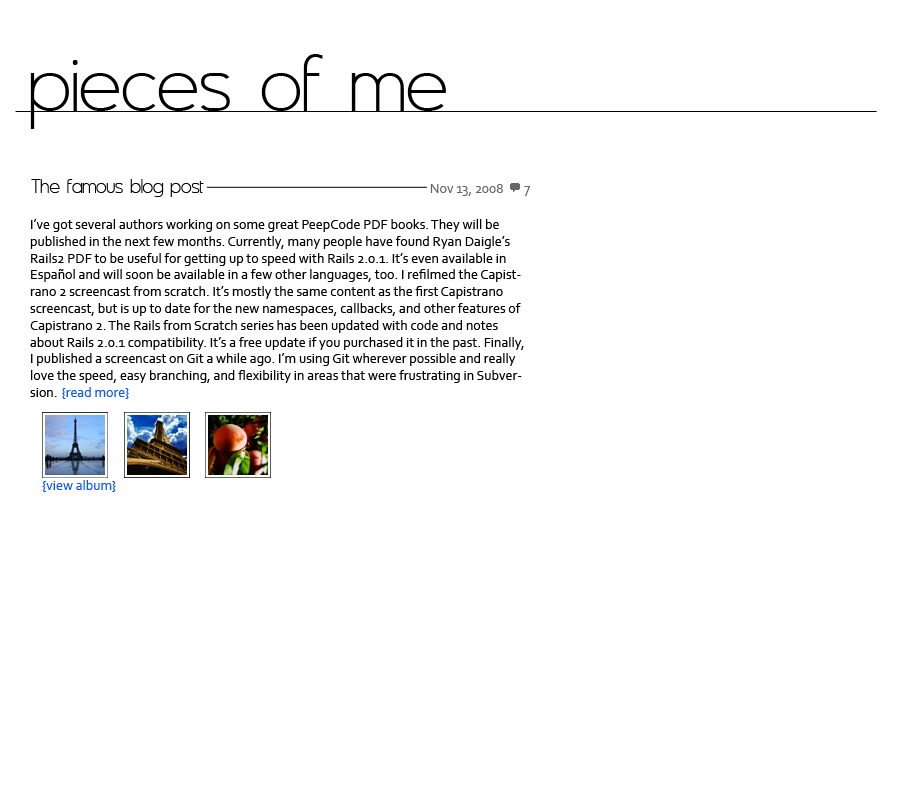
<style>
.page{position:relative;width:900px;height:800px;background:#ffffff}
.page>*{position:absolute;margin:0}
.t1{font:96px "Asenine";color:#000000}
.t2{font:24px "Asenine";color:#000000}
.t3{font:14px "Corbel";color:#666666}
.t4{font:14px "Corbel";color:#000000}
.t5{font:14px "Corbel";color:#0a55ff}
</style>
<div class="page">
<p class="t1" style="left:30px;top:54px;width:416px;height:75px">pieces of me</p>
<p class="t2" style="left:31px;top:179px;width:173px;height:18px">The famous blog post</p>
<p class="t3" style="left:430px;top:184px;width:73px;height:12px">Nov 13, 2008</p>
<p class="t3" style="left:524px;top:186px;width:6px;height:10px">7</p>
<p class="t4" style="left:30px;top:219px;width:494px;height:178px">I’ve got several authors working on some great PeepCode PDF books. They will be published in the next few months. Currently, many people have found Ryan Daigle’s Rails2 PDF to be useful for getting up to speed with Rails 2.0.1. It’s even available in Español and will soon be available in a few other languages, too. I refilmed the Capistrano 2 screencast from scratch. It’s mostly the same content as the first Capistrano screencast, but is up to date for the new namespaces, callbacks, and other features of Capistrano 2. The Rails from Scratch series has been updated with code and notes about Rails 2.0.1 compatibility. It’s a free update if you purchased it in the past. Finally, I published a screencast on Git a while ago. I’m using Git wherever possible and really love the speed, easy branching, and flexibility in areas that were frustrating in Subversion.</p>
<p class="t5" style="left:62px;top:387px;width:67px;height:12px">{read more}</p>
<p class="t5" style="left:42px;top:480px;width:74px;height:12px">{view album}</p>
</div>
